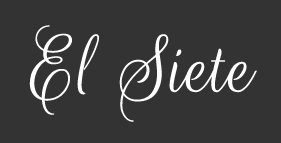
<style>
.page{position:relative;width:281px;height:143px;background:#333333}
.page>*{position:absolute;margin:0}
.t1{font:88.8px "RougeScript-Regular";color:#ffffff}
</style>
<div class="page">
<p class="t1" style="left:29px;top:25px;width:228px;height:97px">El Siete</p>
</div>
